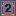
<style>
.page{position:relative;width:16px;height:16px;background:#8d697a}
.page>*{position:absolute;margin:0}
.t1{font:11px "ArialRoundedMTBold";color:#0d2b45;font-weight:bold}
</style>
<div class="page">
<p class="t1" style="left:5px;top:4px;width:6px;height:8px">2</p>
</div>
